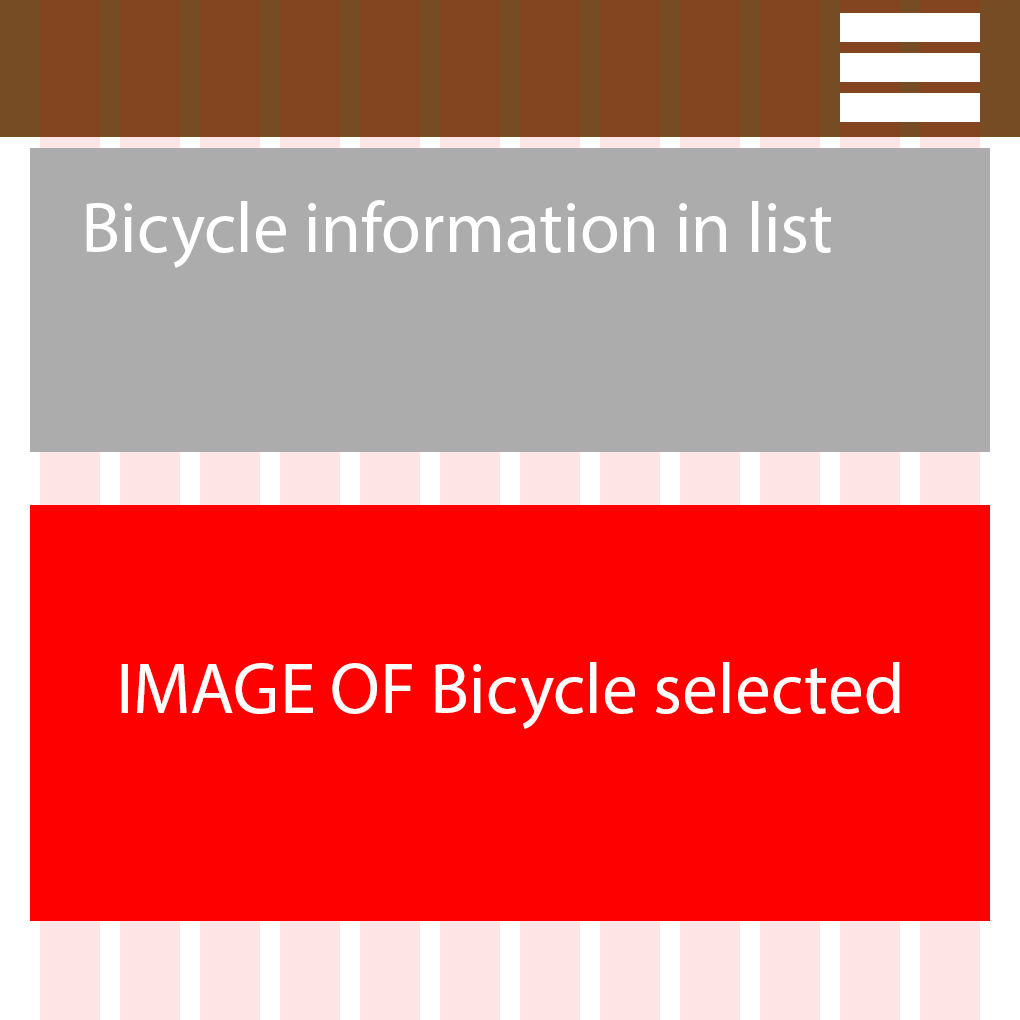
<style>
.page{position:relative;width:1020px;height:1020px;background:#ff0000}
.page>*{position:absolute;margin:0}
.t1{font:72px "MyriadPro-Regular";color:#ffffff}
</style>
<div class="page">
<p class="t1" style="left:86px;top:200px;width:745px;height:68px">Bicycle information in list</p>
<p class="t1" style="left:121px;top:662px;width:779px;height:67px">IMAGE OF Bicycle selected</p>
</div>
